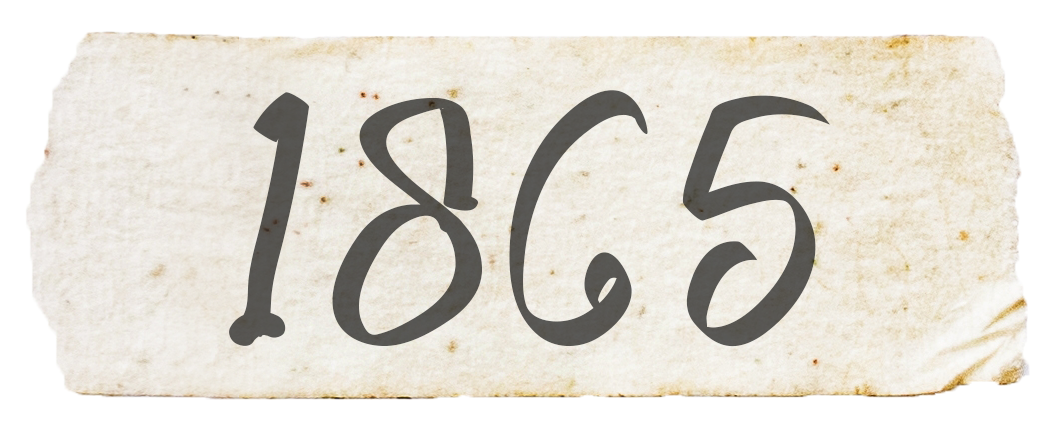
<style>
.page{position:relative;width:1057px;height:429px;background:#ffffff}
.page>*{position:absolute;margin:0}
.t1{font:500px "CrustaceansSignatureDEMO-Reg";color:#575551}
</style>
<div class="page">
<p class="t1" style="left:229px;top:90px;width:601px;height:257px">1865</p>
</div>
